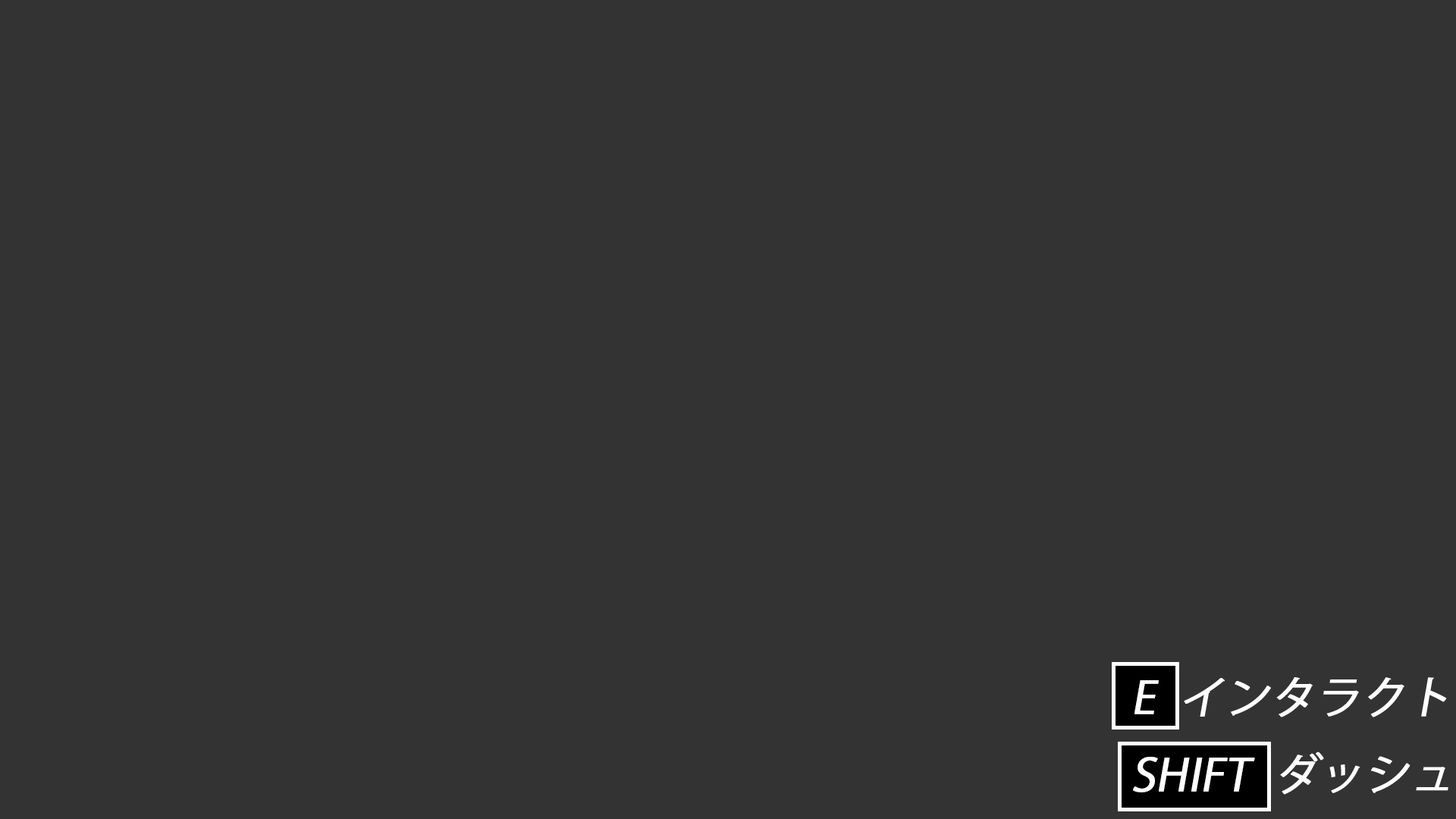
<style>
.page{position:relative;width:1456px;height:819px;background:#333333}
.page>*{position:absolute;margin:0}
.t1{font:44.2px "KozGoPr6N-Regular";color:#ffffff;font-weight:bold;font-style:italic}
</style>
<div class="page">
<p class="t1" style="left:1133px;top:677px;width:315px;height:118px">E  インタラクト<br>SHIFT  ダッシュ</p>
</div>
